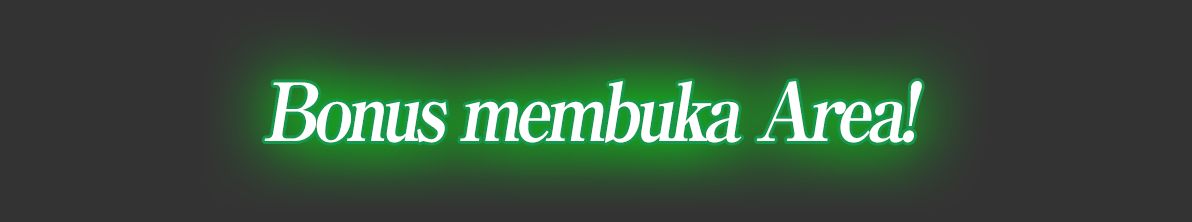
<style>
.page{position:relative;width:1192px;height:222px;background:#333333}
.page>*{position:absolute;margin:0}
.t1{font:80px "RyuminPro-ExBold";letter-spacing:-0.08em;color:#ffffff;font-style:italic;scale:0.9 1}
</style>
<div class="page">
<p class="t1" style="left:264px;top:81px;width:658px;height:62px">Bonus membuka Area!</p>
</div>
